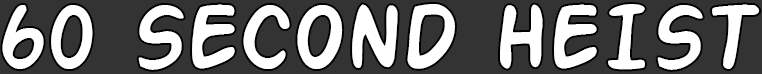
<style>
.page{position:relative;width:762px;height:74px;background:#333333}
.page>*{position:absolute;margin:0}
.t1{font:100px "ActionMan";color:#ffffff}
</style>
<div class="page">
<p class="t1" style="left:2px;top:4px;width:758px;height:66px">60 SECOND HEIST</p>
</div>
